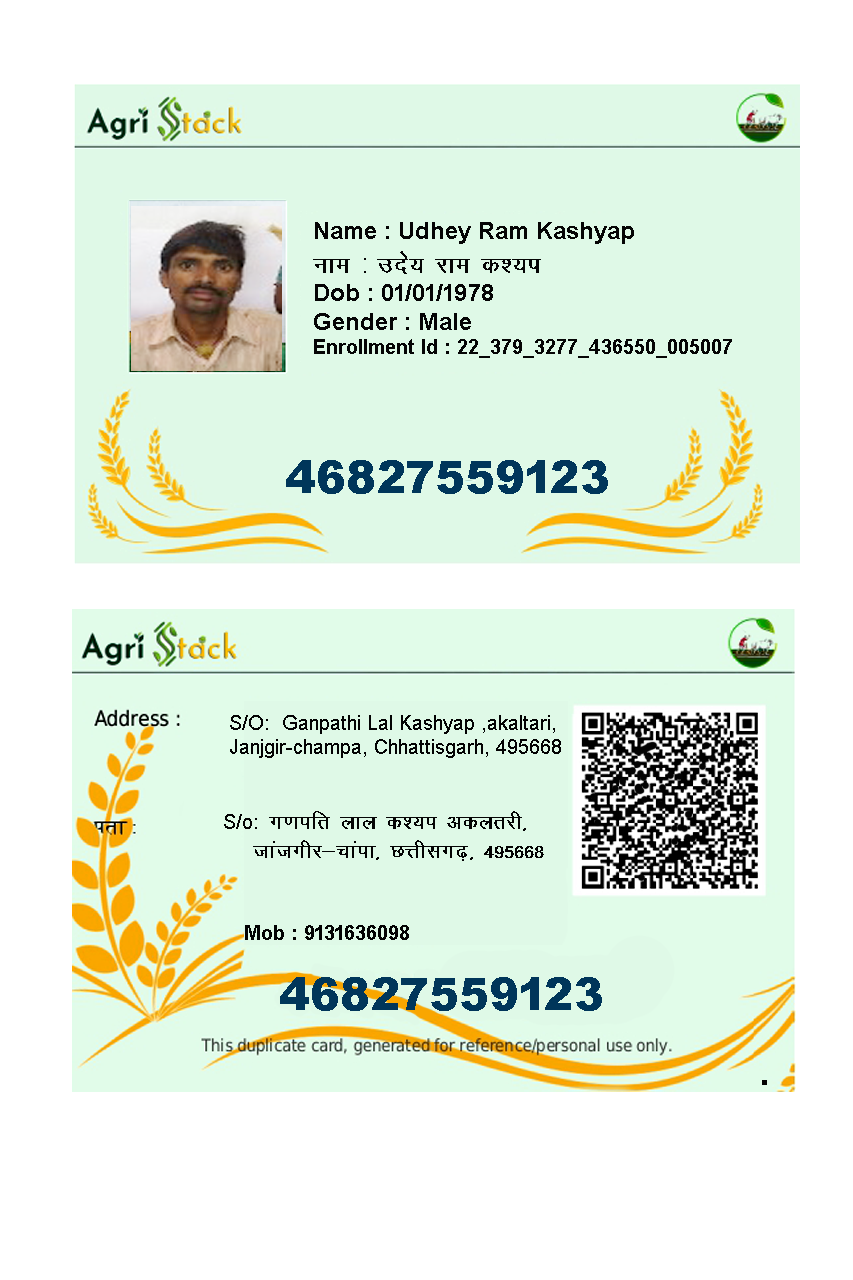
<style>
.page{position:relative;width:853px;height:1280px;background:#ffffff}
.page>*{position:absolute;margin:0}
.t1{font:20px "Arial-BoldMT";color:#050505}
.t2{font:24px "Arial-BoldMT";color:#050505}
.t3{font:28px "KrutiDev011";color:#050505}
.t4{font:28px "ArialMT";color:#050505}
.t5{font:45px "Arial-Black";color:#00365a}
.t6{font:20px "ArialMT";color:#030303}
.t7{font:24px "KrutiDev011";color:#030303}
.t8{font:24px "KrutiDev011";color:#050505}
.t9{font:20px "Arial-BoldMT";color:#030303}
</style>
<div class="page">
<p class="t1" style="left:313px;top:222px;width:419px;height:136px"><span class="t2">Name : Udhey Ram Kashyap<br></span><span class="t3">uke </span><span class="t4">: </span><span class="t3">mns; jke d’;i<br></span><span class="t2">Dob : 01/01/1978<br>Gender : Male<br></span>Enrollment Id : 22_379_3277_436550_005007</p>
<p class="t5" style="left:286px;top:460px;width:322px;height:34px">46827559123</p>
<p class="t6" style="left:230px;top:715px;width:331px;height:43px">S/O: गGanpathi Lal Kashyap ,akaltari, <br>Janjgir-champa, Chhattisgarh, 495668</p>
<p class="t7" style="left:224px;top:811px;width:320px;height:50px"><span class="t6">S/o: </span><span class="t8">x.kifr yky d’;i</span> vdyrjh] <br>   tkatxhj&amp;pkaik] NÙkhlx&lt;+] 495668</p>
<p class="t9" style="left:245px;top:925px;width:164px;height:15px">Mob : 9131636098</p>
<p class="t5" style="left:280px;top:977px;width:322px;height:34px">46827559123</p>
</div>
